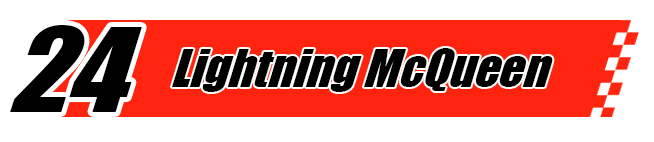
<style>
.page{position:relative;width:654px;height:142px;background:#ffffff}
.page>*{position:absolute;margin:0}
.t1{font:112.8px "Impact";color:#000000;scale:1.05 1}
.t2{font:50.2px "Impact";color:#000000;scale:0.96 1}
</style>
<div class="page">
<p class="t1" style="left:10px;top:25px;width:132px;height:87px">24</p>
<p class="t2" style="left:172px;top:48px;width:381px;height:44px">Lightning McQueen</p>
</div>
